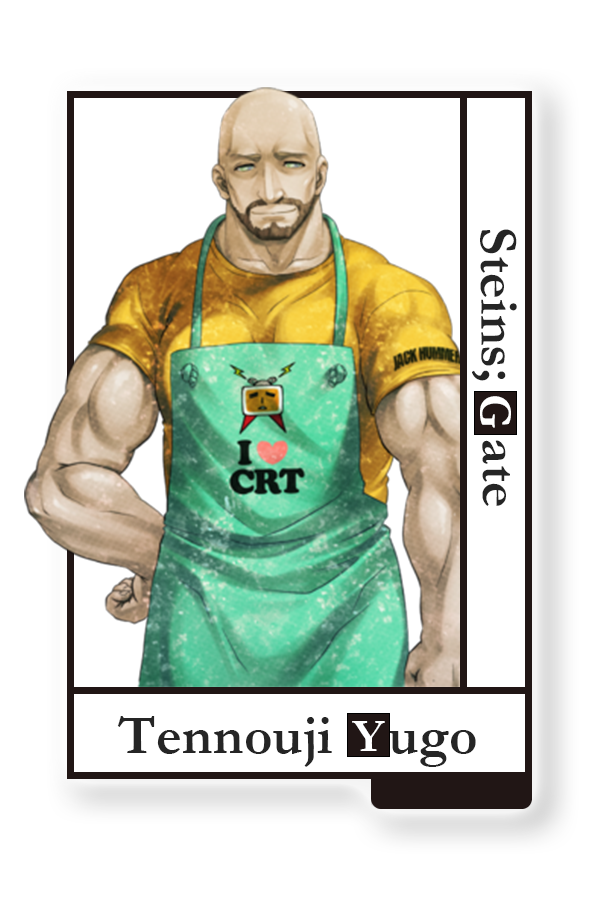
<style>
.page{position:relative;width:600px;height:900px;background:#ffffff}
.page>*{position:absolute;margin:0}
.t1{font:55.4px "Garamond-Bold";color:#252525}
.t2{font:47px "Garamond-Bold";color:#ffffff}
</style>
<div class="page">
<p class="t1" style="left:472px;top:229px;width:45px;height:277px;rotate:89deg">Steins;    ate</p>
<p class="t2" style="left:480px;top:396px;width:31px;height:32px;rotate:90deg">G</p>
<p class="t1" style="left:117px;top:716px;width:359px;height:51px">Tennouji    ugo</p>
<p class="t2" style="left:352px;top:721px;width:33px;height:30px">Y</p>
</div>
